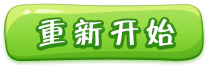
<style>
.page{position:relative;width:208px;height:65px}
.page>*{position:absolute;margin:0}
.t1{font:30px "FZZBHJW--GB1-0";letter-spacing:-0.02em;color:#ffffff}
</style>
<div class="page">
<p class="t1" style="left:38px;top:19px;width:137px;height:28px">重 新 开 始</p>
</div>
